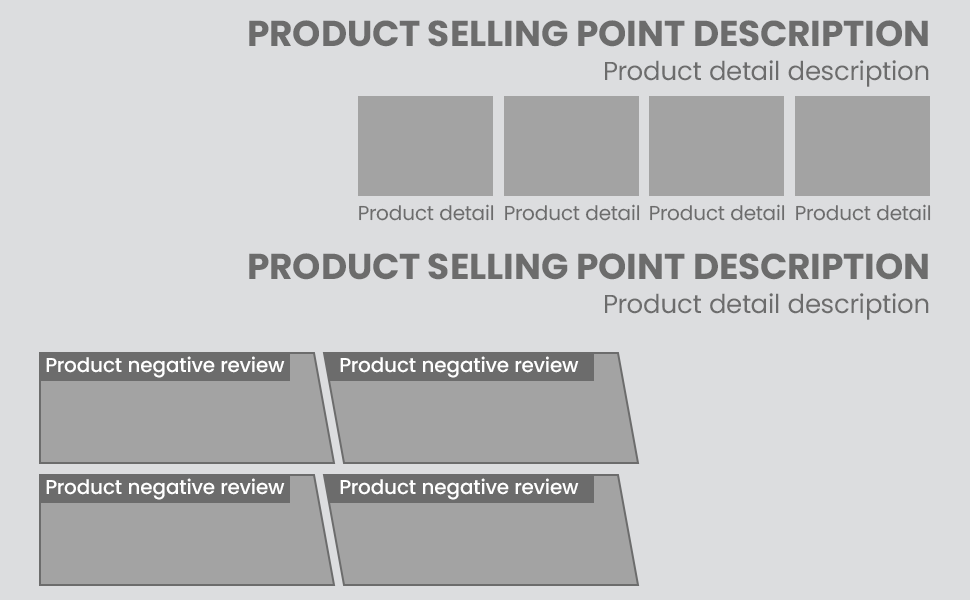
<style>
.page{position:relative;width:970px;height:600px;background:#dcdddf}
.page>*{position:absolute;margin:0}
.t1{font:36px "Poppins-Bold";color:#6c6c6c;text-transform:uppercase}
.t2{font:26px "Poppins-Regular";color:#6c6c6c}
.t3{font:20px "Poppins-Regular";color:#6c6c6c}
.t4{font:20px "Poppins-Medium";color:#ffffff}
</style>
<div class="page">
<p class="t1" style="left:249px;top:20px;width:679px;height:27px">Product selling point description</p>
<p class="t2" style="left:605px;top:60px;width:324px;height:27px">Product detail description</p>
<p class="t3" style="left:359px;top:204px;width:135px;height:17px">Product detail</p>
<p class="t3" style="left:505px;top:204px;width:135px;height:17px">Product detail</p>
<p class="t3" style="left:650px;top:204px;width:135px;height:17px">Product detail</p>
<p class="t3" style="left:796px;top:204px;width:135px;height:17px">Product detail</p>
<p class="t1" style="left:249px;top:253px;width:679px;height:27px">Product selling point description</p>
<p class="t2" style="left:605px;top:293px;width:324px;height:27px">Product detail description</p>
<p class="t4" style="left:46px;top:356px;width:239px;height:22px">Product negative review</p>
<p class="t4" style="left:340px;top:356px;width:239px;height:22px">Product negative review</p>
<p class="t4" style="left:46px;top:478px;width:239px;height:22px">Product negative review</p>
<p class="t4" style="left:340px;top:478px;width:239px;height:22px">Product negative review</p>
</div>
